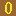
<style>
.page{position:relative;width:16px;height:16px;background:#996633}
.page>*{position:absolute;margin:0}
.t1{font:18px "Sylfaen";color:#f5e814}
</style>
<div class="page">
<p class="t1" style="left:5px;top:2px;width:7px;height:12px">0</p>
</div>
